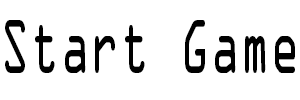
<style>
.page{position:relative;width:300px;height:100px;background:#ffffff}
.page>*{position:absolute;margin:0}
.t1{font:67.8px "OCRAStd";color:#000000;scale:0.61 1}
</style>
<div class="page">
<p class="t1" style="left:5px;top:20px;width:290px;height:53px">Start Game</p>
</div>
